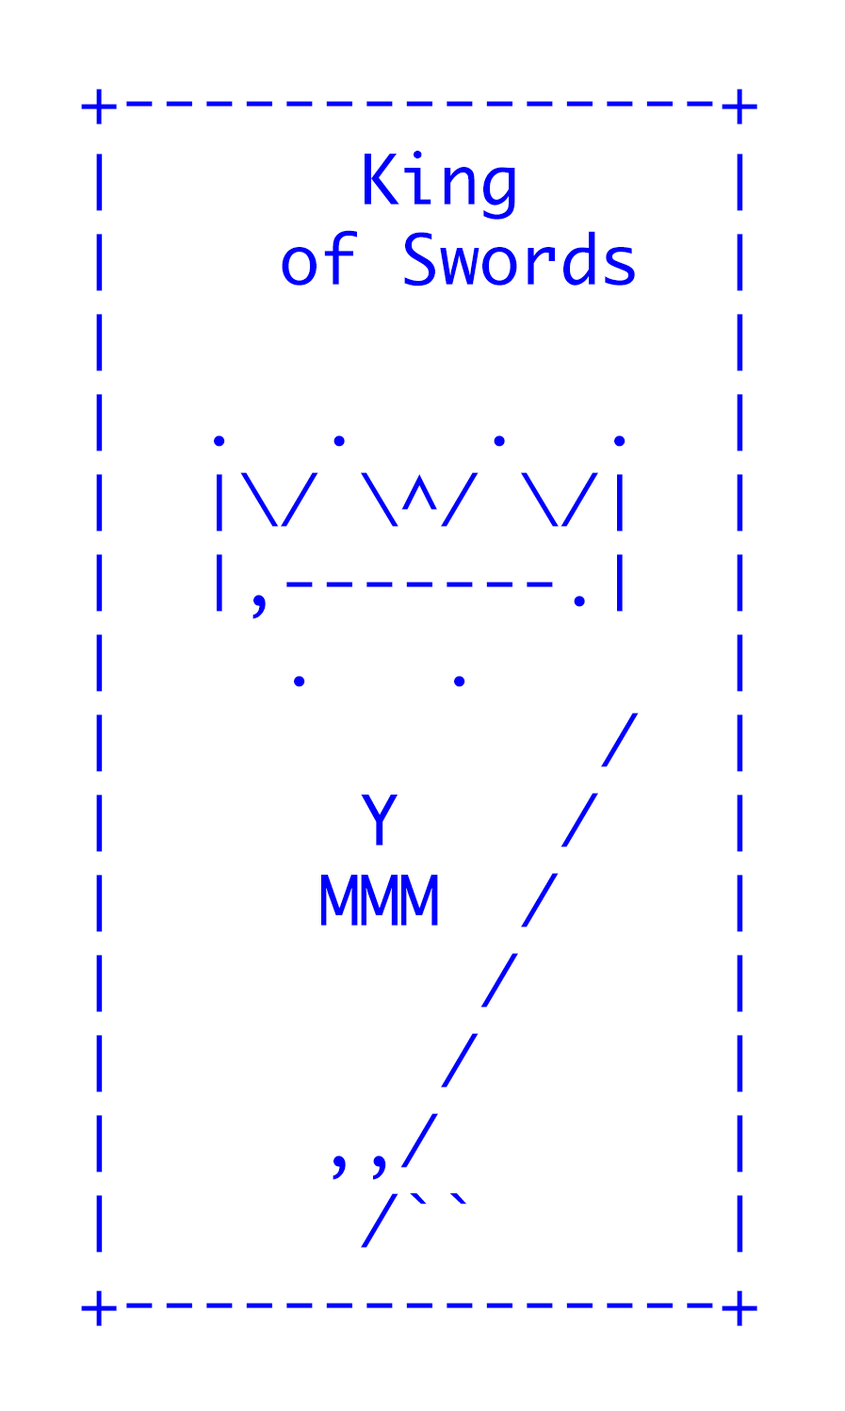
<style>
.page{position:relative;width:845px;height:1411px;background:#ffffff}
.page>*{position:absolute;margin:0}
.t1{font:66.7px "Monaco";color:#0000ff}
</style>
<div class="page">
<p class="t1" style="left:81px;top:89px;width:677px;height:1237px">+---------------+<br>│      King     │<br>│    of Swords  │<br>│               │<br>│  .  .   .  .  │<br>│  │\/ \^/ \/│  │<br>│  │,-------.│  │<br>│    .   .      │ <br>│            /  │ <br>│      Y    /   │<br>│     MMM  /    │ <br>│         /     │ <br>│        /      │<br>│     ,,/       │<br>│      /``      │<br>+---------------+</p>
</div>
